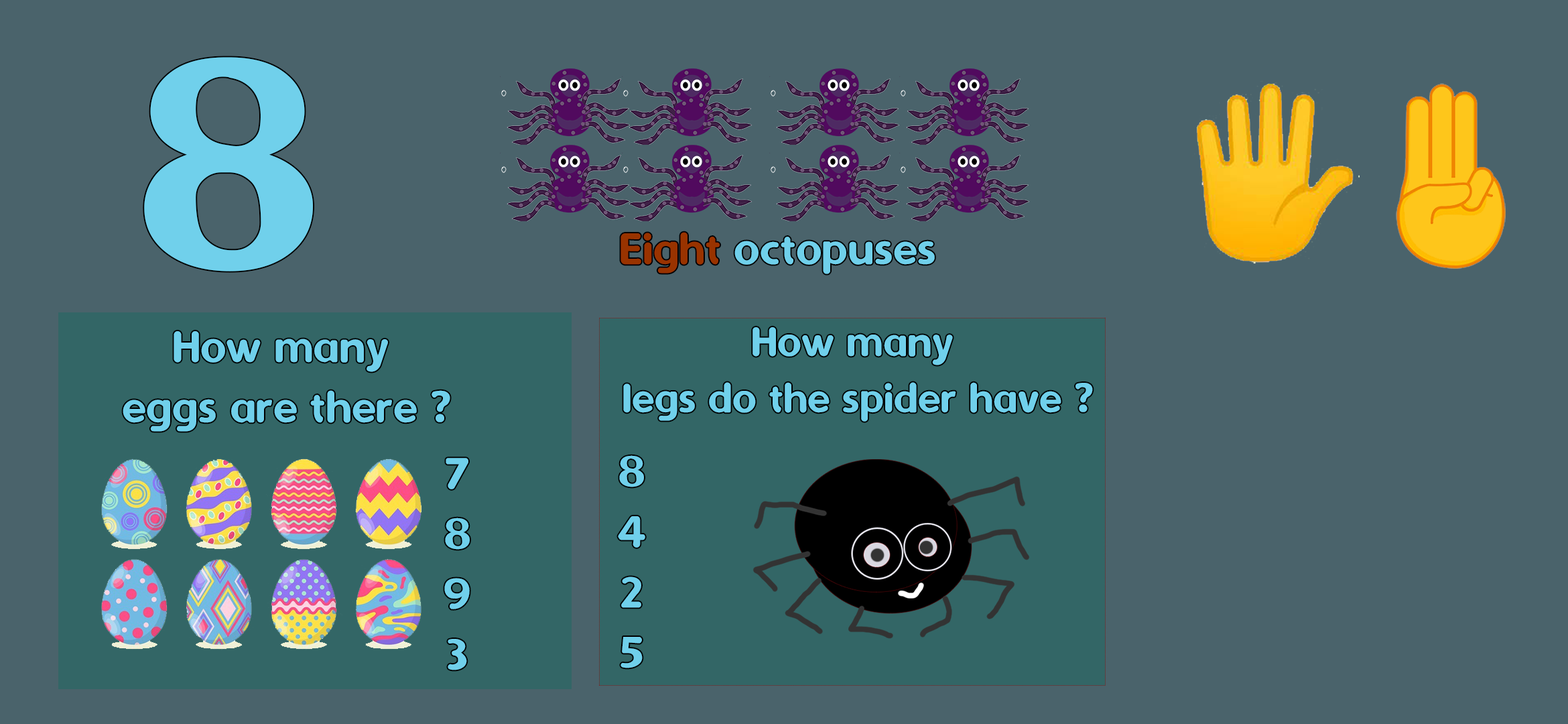
<style>
.page{position:relative;width:1568px;height:724px;background:#4a636b}
.page>*{position:absolute;margin:0}
.t1{font:345.7px "Dyuthi";color:#70d0eb}
.t2{font:50.3px "Dyuthi";color:#70d0eb}
.t3{font:50.3px "Dyuthi";color:#993300}
.t4{font:47px "Dyuthi";color:#70d0eb}
</style>
<div class="page">
<p class="t1" style="left:144px;top:57px;width:169px;height:214px">8</p>
<p class="t2" style="left:620px;top:232px;width:315px;height:42px"><span class="t3">Eight </span>octopuses</p>
<p class="t4" style="left:623px;top:327px;width:470px;height:94px;text-align:center">How many <br>legs do the spider have ?</p>
<p class="t2" style="left:123px;top:331px;width:327px;height:101px;text-align:center">How many <br>eggs are there ?</p>
<p class="t2" style="left:444px;top:458px;width:26px;height:212px;text-align:center">7<br>8<br>9<br>3</p>
<p class="t2" style="left:618px;top:455px;width:27px;height:213px;text-align:center">8<br>4<br>2<br>5</p>
</div>
